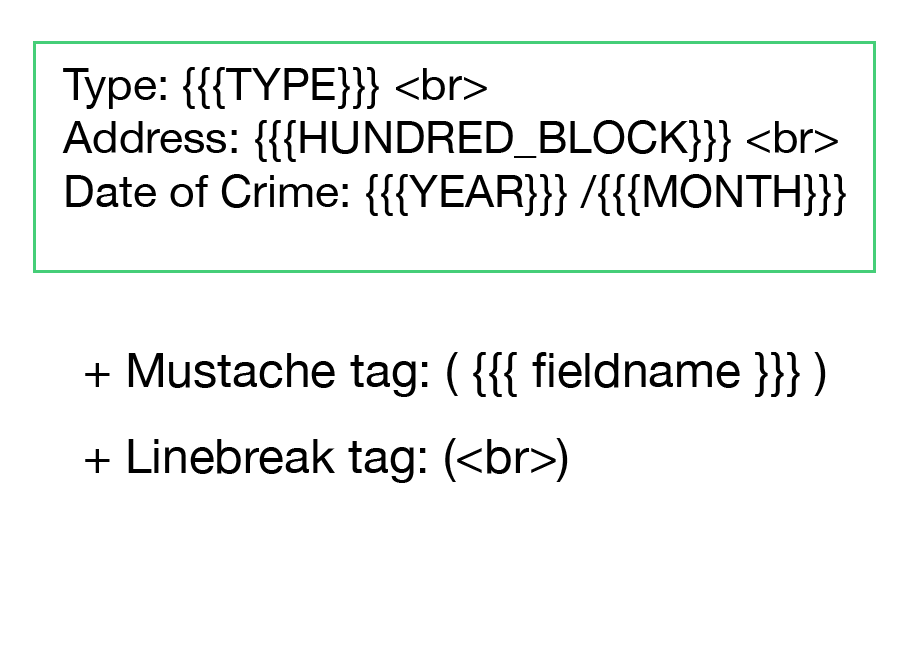
<style>
.page{position:relative;width:900px;height:658px;background:#ffffff}
.page>*{position:absolute;margin:0}
.t1{font:44.4px "HelveticaNeue";color:#000000}
.t2{font:48px "HelveticaNeue";color:#000000}
</style>
<div class="page">
<p class="t1" style="left:62px;top:67px;width:784px;height:149px">Type: {{{TYPE}}} &lt;br&gt;<br>Address: {{{HUNDRED_BLOCK}}} &lt;br&gt;<br>Date of Crime: {{{YEAR}}} /{{{MONTH}}}</p>
<p class="t2" style="left:85px;top:352px;width:741px;height:131px">+ Mustache tag: ( {{{ fieldname }}} )<br>+ Linebreak tag: (&lt;br&gt;)</p>
</div>
